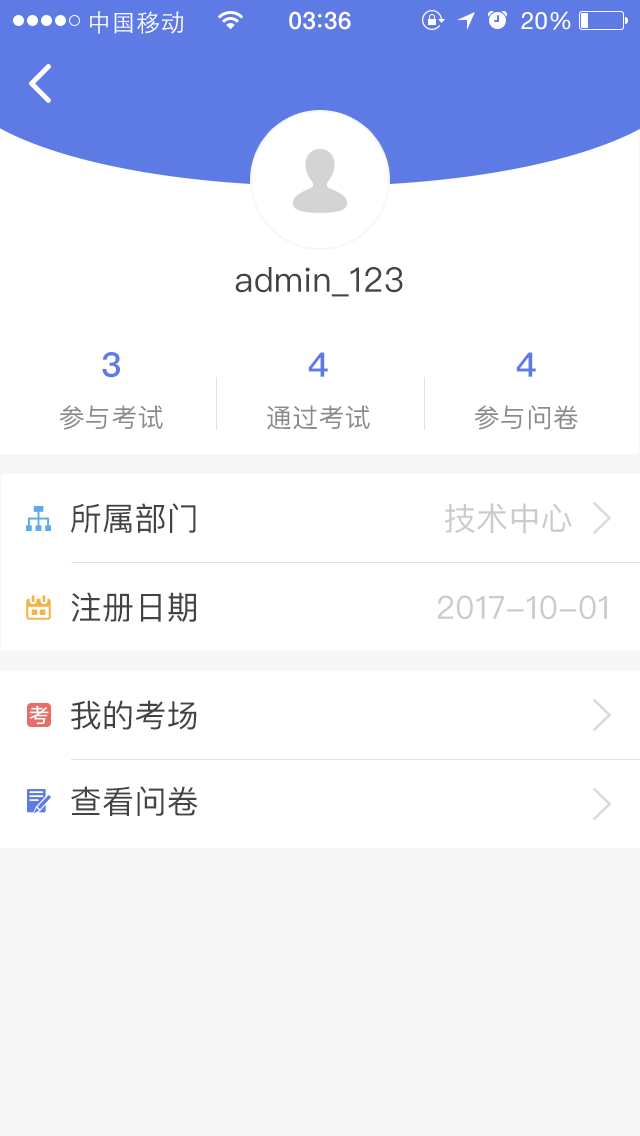
<style>
.page{position:relative;width:640px;height:1136px;background:#ffffff}
.page>*{position:absolute;margin:0}
.t1{font:24px "STHeitiSC-Light";letter-spacing:0.02em;color:#ffffff}
.t2{font:24px "HelveticaNeue-Medium";letter-spacing:0.03em;color:#ffffff}
.t3{font:24px "HelveticaNeue";letter-spacing:0.02em;color:#ffffff}
.t4{font:34px "PingFangSC-Regular";letter-spacing:0.01em;color:#434343}
.t5{font:34px "PingFangSC-Semibold";letter-spacing:0.01em;color:#5e7be5}
.t6{font:26px "PingFangSC-Regular";letter-spacing:0.01em;color:#8a8a8a}
.t7{font:32px "PingFangSC-Regular";letter-spacing:0.01em;color:#434343}
.t8{font:32px "PingFangSC-Regular";letter-spacing:0.01em;color:#cbcbcb}
</style>
<div class="page">
<p class="t1" style="left:90px;top:11px;width:93px;height:23px">中国移动</p>
<p class="t2" style="left:289px;top:11px;width:62px;height:19px">03 36</p>
<p class="t3" style="left:521px;top:11px;width:50px;height:19px">20%</p>
<p class="t4" style="left:235px;top:267px;width:168px;height:30px">admin_123</p>
<p class="t5" style="left:102px;top:352px;width:18px;height:26px">3</p>
<p class="t5" style="left:308px;top:352px;width:20px;height:25px">4</p>
<p class="t5" style="left:516px;top:352px;width:20px;height:25px">4</p>
<p class="t6" style="left:59px;top:405px;width:104px;height:25px">参与考试</p>
<p class="t6" style="left:267px;top:405px;width:103px;height:25px">通过考试</p>
<p class="t6" style="left:474px;top:405px;width:104px;height:25px">参与问卷</p>
<p class="t7" style="left:70px;top:503px;width:126px;height:30px">所属部门</p>
<p class="t8" style="left:444px;top:503px;width:128px;height:31px">技术中心</p>
<p class="t7" style="left:71px;top:592px;width:125px;height:30px">注册日期</p>
<p class="t8" style="left:437px;top:595px;width:170px;height:25px">2017-10-01</p>
<p class="t7" style="left:71px;top:700px;width:126px;height:30px">我的考场</p>
<p class="t7" style="left:71px;top:786px;width:127px;height:30px">查看问卷</p>
</div>
